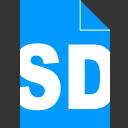
<style>
.page{position:relative;width:128px;height:128px;background:#0099ff}
.page>*{position:absolute;margin:0}
.t1{font:90px "Arial-Black";color:#ffffff;scale:0.8 1}
</style>
<div class="page">
<p class="t1" style="left:13px;top:43px;width:104px;height:68px">SD</p>
</div>
